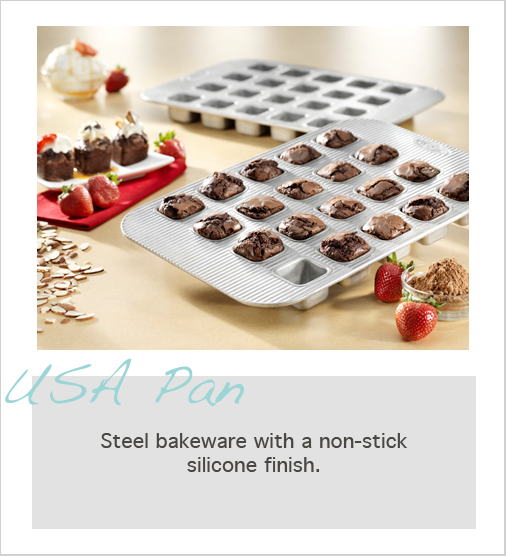
<style>
.page{position:relative;width:506px;height:556px;background:#ffffff}
.page>*{position:absolute;margin:0}
.t1{font:56px "Handwriting-Dakota";color:#9bd5d5}
.t2{font:20px "Geneva";color:#484743}
</style>
<div class="page">
<p class="t1" style="left:5px;top:358px;width:239px;height:49px">USA Pan</p>
<p class="t2" style="left:101px;top:433px;width:306px;height:39px;text-align:center">Steel bakeware with a non-stick<br>silicone finish.</p>
</div>
